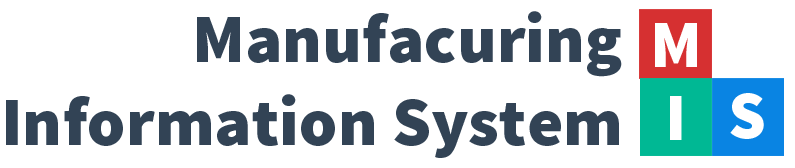
<style>
.page{position:relative;width:795px;height:168px;background:#ffffff}
.page>*{position:absolute;margin:0}
.t1{font:68.8px "SourceSansPro-Black";color:#324355}
.t2{font:67.3px "SourceSansPro-Black";color:#ffffff}
</style>
<div class="page">
<p class="t1" style="left:6px;top:11px;width:616px;height:147px;text-align:right">Manufacuring<br>Information System</p>
<p class="t2" style="left:655px;top:23px;width:42px;height:44px">M</p>
<p class="t2" style="left:670px;top:96px;width:12px;height:44px">I</p>
<p class="t2" style="left:730px;top:93px;width:34px;height:46px">S</p>
</div>
